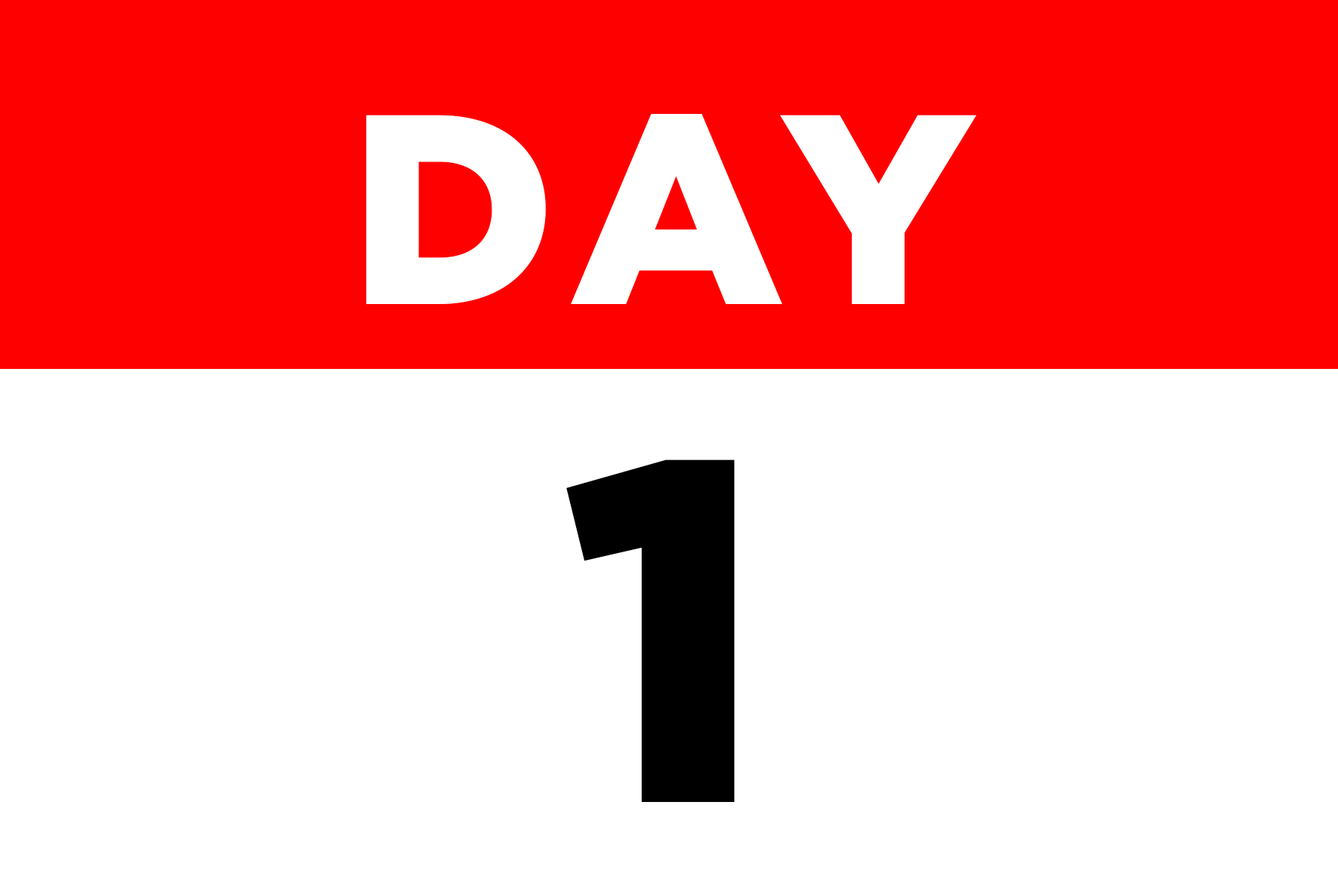
<style>
.page{position:relative;width:1338px;height:891px;background:#ffffff}
.page>*{position:absolute;margin:0}
.t1{font:269.8px "Gotham-Black";letter-spacing:0.1em;color:#ffffff}
.t2{font:485.6px "Gotham-Black";letter-spacing:0.1em;color:#000000}
</style>
<div class="page">
<p class="t1" style="left:366px;top:114px;width:610px;height:190px">DAY</p>
<p class="t2" style="left:566px;top:460px;width:168px;height:342px">1</p>
</div>
